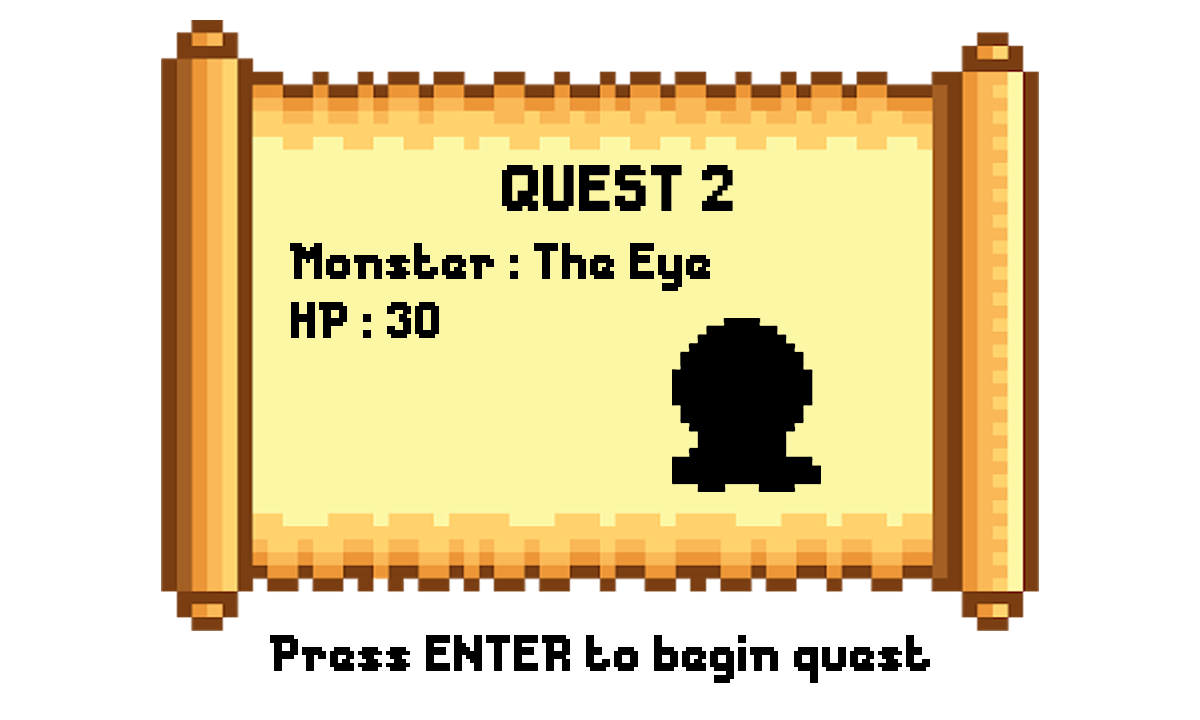
<style>
.page{position:relative;width:1200px;height:720px;background:#ffffff}
.page>*{position:absolute;margin:0}
.t1{font:61.3px "Messe-Duesseldorf";color:#000000}
.t2{font:48px "Messe-Duesseldorf";color:#000000}
</style>
<div class="page">
<p class="t1" style="left:502px;top:165px;width:231px;height:46px">QUEST 2</p>
<p class="t2" style="left:290px;top:243px;width:420px;height:48px">Monster : The Eye</p>
<p class="t2" style="left:291px;top:302px;width:148px;height:36px">HP : 30</p>
<p class="t2" style="left:270px;top:635px;width:660px;height:48px">Press ENTER to begin quest</p>
</div>
